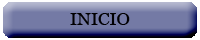
<style>
.page{position:relative;width:200px;height:40px;background:#747aa5}
.page>*{position:absolute;margin:0}
.t1{font:18px "Vani";color:#010002;text-transform:uppercase}
</style>
<div class="page">
<p class="t1" style="left:70px;top:13px;width:60px;height:12px">Inicio</p>
</div>
